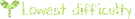
<style>
.page{position:relative;width:135px;height:19px;background:#ffffff}
.page>*{position:absolute;margin:0}
.t1{font:18px "DJBChalkItUp";scale:0.9 1}
</style>
<div class="page">
<p class="t1" style="left:22px;top:1px;width:110px;height:18px">Lowest difficulty</p>
</div>
